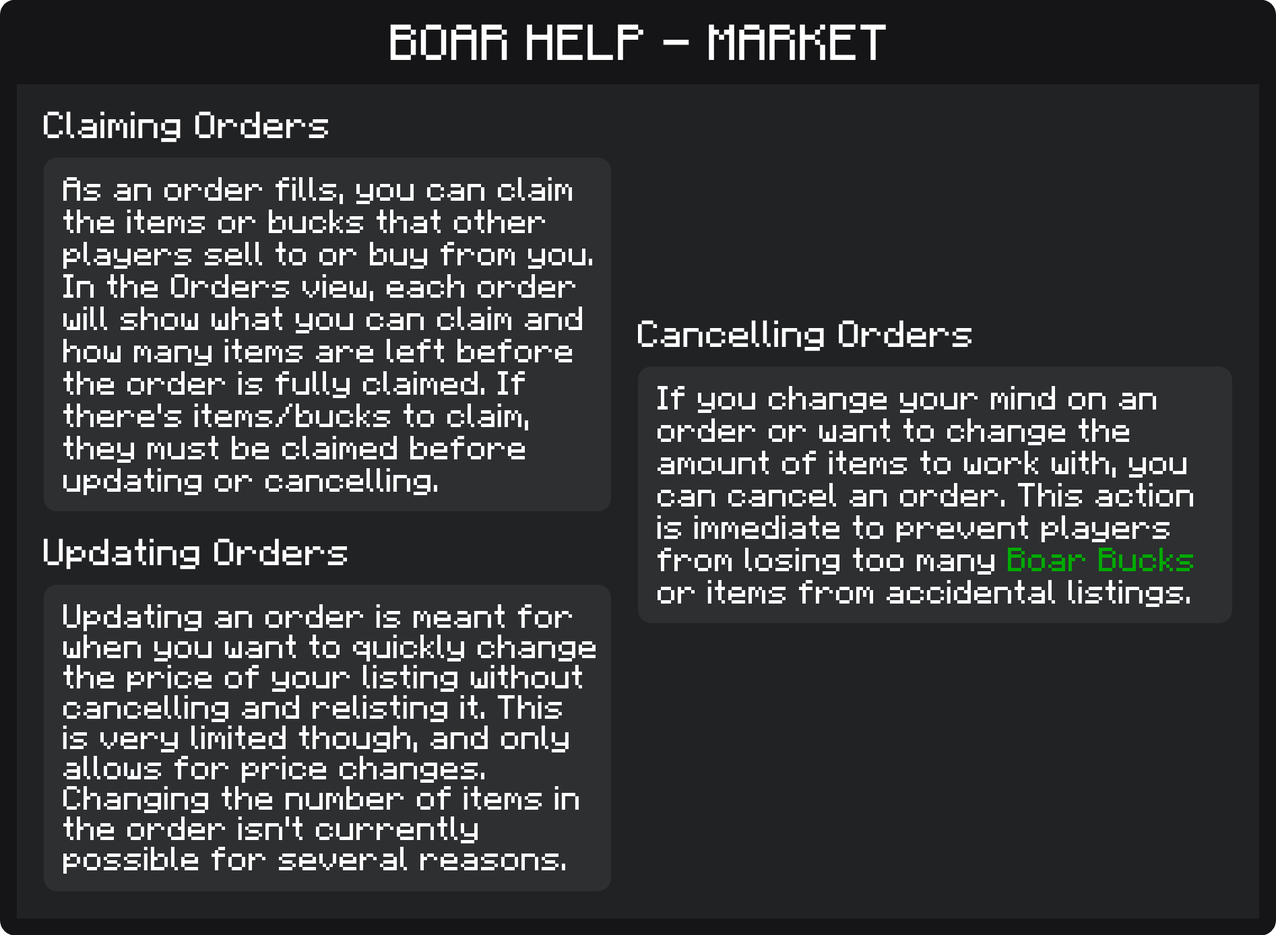
<style>
.page{position:relative;width:1276px;height:935px;background:#212224}
.page>*{position:absolute;margin:0}
.t1{font:40.4px "F77-Minecraft";color:#ffffff}
.t2{font:30.3px "F77-Minecraft";color:#ffffff}
.t3{font:26.9px "F77-Minecraft";color:#ffffff}
.t4{font:26.9px "F77-Minecraft";color:#00aa00}
.t5{font:26.9px/30.3px "F77-Minecraft";color:#ffffff}
</style>
<div class="page">
<p class="t1" style="left:390px;top:24px;width:496px;height:36px">BOAR HELP - MARKET</p>
<p class="t2" style="left:44px;top:111px;width:284px;height:31px">Claiming Orders</p>
<p class="t3" style="left:63px;top:177px;width:529px;height:318px">As an order fills, you can claim<br>the items or bucks that other<br>players sell to or buy from you.<br>In the Orders view, each order<br>will show what you can claim and<br>how many items are left before<br>the order is fully claimed. If<br>there's items/bucks to claim, <br>they must be claimed before <br>updating or cancelling.</p>
<p class="t2" style="left:638px;top:320px;width:333px;height:31px">Cancelling Orders</p>
<p class="t3" style="left:657px;top:386px;width:536px;height:221px">If you change your mind on an<br>order or want to change the<br>amount of items to work with, you<br>can cancel an order. This action<br>is immediate to prevent players<br>from losing too many <span class="t4">Boar Bucks<br></span>or items from accidental listings.</p>
<p class="t2" style="left:44px;top:538px;width:303px;height:31px">Updating Orders</p>
<p class="t5" style="left:63px;top:604px;width:532px;height:270px">Updating an order is meant for<br>when you want to quickly change<br>the price of your listing without<br>cancelling and relisting it. This<br>is very limited though, and only<br>allows for price changes.<br>Changing the number of items in<br>the order isn't currently <br>possible for several reasons.</p>
</div>
